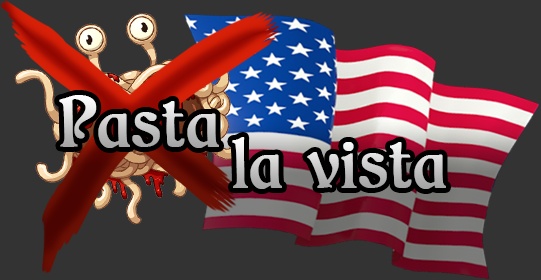
<style>
.page{position:relative;width:541px;height:280px;background:#333333}
.page>*{position:absolute;margin:0}
.t1{font:68px "CATChilds";font-weight:bold}
</style>
<div class="page">
<p class="t1" style="left:59px;top:95px;width:160px;height:53px">Pasta</p>
<p class="t1" style="left:232px;top:137px;width:214px;height:52px">la vista</p>
</div>
